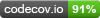
<style>
.page{position:relative;width:100px;height:18px}
.page>*{position:absolute;margin:0}
.t1{font:12px "HelveticaNeue";color:#ffffff}
.t2{font:11px "Arial-BoldMT";color:#ffffff;scale:1.1 1}
</style>
<div class="page">
<p class="t1" style="left:4px;top:4px;width:60px;height:9px">codecov.io</p>
<p class="t2" style="left:72px;top:5px;width:24px;height:8px">91%</p>
</div>
